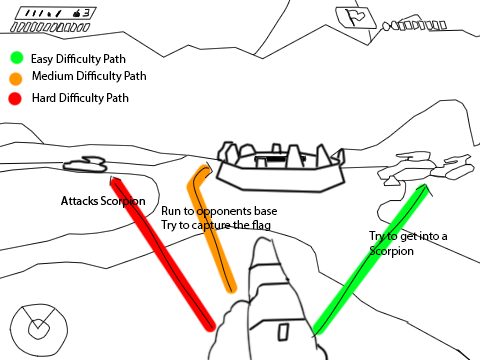
<style>
.page{position:relative;width:480px;height:360px;background:#ffffff}
.page>*{position:absolute;margin:0}
.t1{font:12px "MyriadPro-Regular";color:#000000}
</style>
<div class="page">
<p class="t1" style="left:31px;top:54px;width:95px;height:12px">Easy Difficulty Path</p>
<p class="t1" style="left:32px;top:71px;width:114px;height:12px">Medium Difficulty Path</p>
<p class="t1" style="left:32px;top:93px;width:97px;height:12px">Hard Difficulty Path</p>
<p class="t1" style="left:161px;top:206px;width:116px;height:26px">Run to opponents base<br>Try to capture the flag</p>
<p class="t1" style="left:369px;top:231px;width:79px;height:27px">Try to get into a<br>Scorpion</p>
</div>
